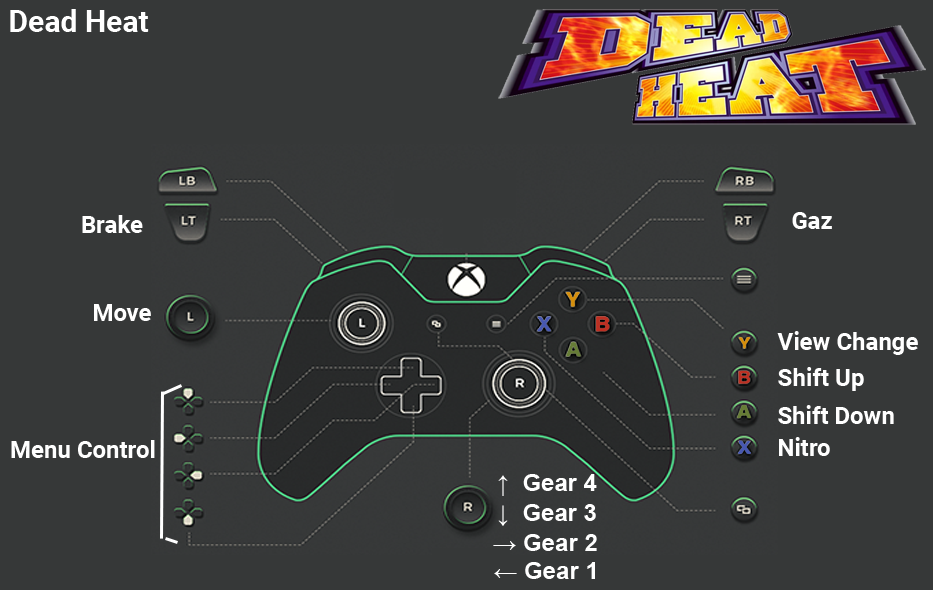
<style>
.page{position:relative;width:933px;height:590px;background:#363838}
.page>*{position:absolute;margin:0}
.t1{font:30px "Roboto-Bold";color:#ffffff}
.t2{font:24px "Roboto-Bold";color:#ffffff}
.t3{font:24px "Arial-BoldMT";color:#ffffff}
</style>
<div class="page">
<p class="t1" style="left:10px;top:9px;width:139px;height:23px">Dead Heat</p>
<p class="t2" style="left:82px;top:215px;width:61px;height:18px">Brake</p>
<p class="t2" style="left:792px;top:212px;width:40px;height:17px">Gaz</p>
<p class="t2" style="left:94px;top:304px;width:57px;height:17px">Move</p>
<p class="t2" style="left:777px;top:331px;width:141px;height:24px">View Change</p>
<p class="t2" style="left:778px;top:367px;width:86px;height:24px">Shift Up</p>
<p class="t2" style="left:778px;top:405px;width:116px;height:19px">Shift Down</p>
<p class="t2" style="left:779px;top:437px;width:51px;height:19px">Nitro</p>
<p class="t2" style="left:11px;top:440px;width:144px;height:18px">Menu Control</p>
<p class="t3" style="left:498px;top:474px;width:99px;height:22px">↑  Gear 4</p>
<p class="t3" style="left:498px;top:504px;width:98px;height:22px">↓  Gear 3</p>
<p class="t3" style="left:493px;top:534px;width:104px;height:17px">→ Gear 2</p>
<p class="t3" style="left:494px;top:562px;width:101px;height:17px">← Gear 1</p>
</div>
